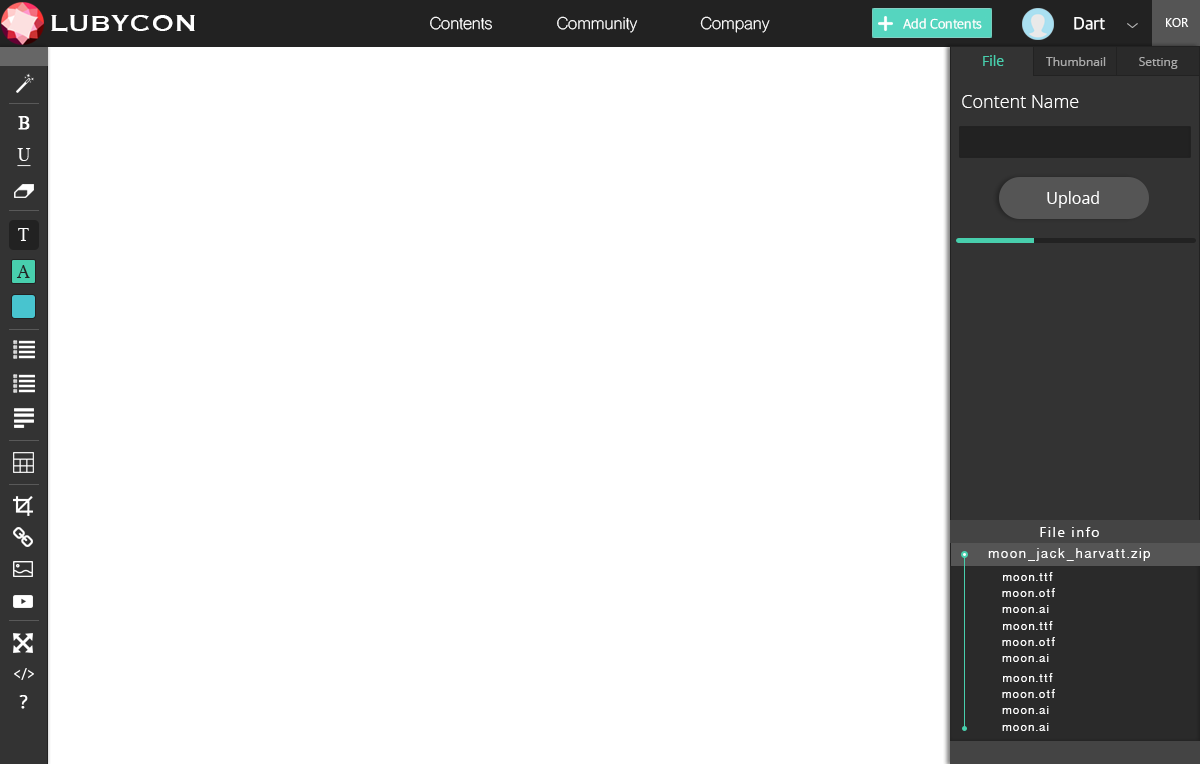
<style>
.page{position:relative;width:1200px;height:764px;background:#ffffff}
.page>*{position:absolute;margin:0}
.t1{font:30px "Copperplate";color:#ffffff}
.t2{font:16px "ShreeDev0714";color:#ffffff}
.t3{font:18px "AppleSDGothicNeo-Regular";color:#ffffff}
.t4{font:14px "AppleSDGothicNeo-Light";color:#ffffff}
.t5{font:12px "LaoUI";color:#ffffff}
.t6{font:14px "OpenSans";color:#48cfad}
.t7{font:12px "OpenSans";color:#aaaaaa}
.t8{font:18px "OpenSans-Light";color:#ffffff}
.t9{font:16px "OpenSans";color:#ffffff}
.t10{font:18px "Times-Roman";color:#222222}
.t11{font:14px "LaoUI";letter-spacing:0.1em;color:#ffffff}
.t12{font:14px "TamilSangamMN";letter-spacing:0.1em;color:#ffffff}
.t13{font:12px "TamilSangamMN";letter-spacing:0.1em;color:#ffffff}
</style>
<div class="page">
<p class="t1" style="left:51px;top:15px;width:144px;height:17px">LUBYCON</p>
<p class="t2" style="left:430px;top:16px;width:62px;height:14px">Contents</p>
<p class="t2" style="left:557px;top:16px;width:81px;height:17px">Community</p>
<p class="t2" style="left:700px;top:16px;width:70px;height:17px">Company</p>
<p class="t3" style="left:1074px;top:17px;width:31px;height:13px">Dart</p>
<p class="t4" style="left:903px;top:18px;width:79px;height:11px">Add Contents</p>
<p class="t5" style="left:1166px;top:18px;width:23px;height:9px">KOR</p>
<p class="t6" style="left:983px;top:55px;width:21px;height:11px">File</p>
<p class="t7" style="left:1046px;top:57px;width:60px;height:9px">Thumbnail</p>
<p class="t7" style="left:1139px;top:57px;width:39px;height:12px">Setting</p>
<p class="t8" style="left:962px;top:95px;width:117px;height:13px">Content Name</p>
<p class="t9" style="left:1047px;top:191px;width:52px;height:17px">Upload</p>
<p class="t10" style="left:16px;top:265px;width:14px;height:13px">A</p>
<p class="t11" style="left:1040px;top:527px;width:59px;height:10px">File info</p>
<p class="t12" style="left:988px;top:548px;width:162px;height:13px">moon_jack_harvatt.zip</p>
<p class="t13" style="left:1003px;top:572px;width:50px;height:9px">moon.ttf</p>
<p class="t13" style="left:1002px;top:588px;width:53px;height:9px">moon.otf</p>
<p class="t13" style="left:1002px;top:605px;width:47px;height:8px">moon.ai</p>
<p class="t13" style="left:1003px;top:621px;width:50px;height:9px">moon.ttf</p>
<p class="t13" style="left:1002px;top:637px;width:53px;height:9px">moon.otf</p>
<p class="t13" style="left:1002px;top:654px;width:47px;height:8px">moon.ai</p>
<p class="t13" style="left:1003px;top:673px;width:50px;height:9px">moon.ttf</p>
<p class="t13" style="left:1002px;top:689px;width:53px;height:9px">moon.otf</p>
<p class="t13" style="left:1002px;top:706px;width:47px;height:8px">moon.ai</p>
<p class="t13" style="left:1002px;top:723px;width:47px;height:8px">moon.ai</p>
</div>
